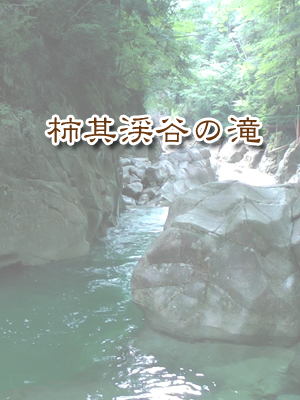
<style>
.page{position:relative;width:300px;height:400px}
.page>*{position:absolute;margin:0}
.t1{font:36px "DFLeiSho-SB-MP-RKSJ-H";color:#68370f}
</style>
<div class="page">
<p class="t1" style="left:47px;top:117px;width:214px;height:26px">柿其渓谷の滝</p>
</div>
